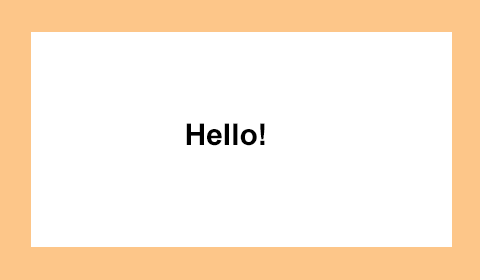
<style>
.page{position:relative;width:480px;height:280px;background:#ffffff}
.page>*{position:absolute;margin:0}
.t1{font:30px "Arial-BoldMT";color:#000000}
</style>
<div class="page">
<p class="t1" style="left:186px;top:123px;width:79px;height:23px">Hello!</p>
</div>
